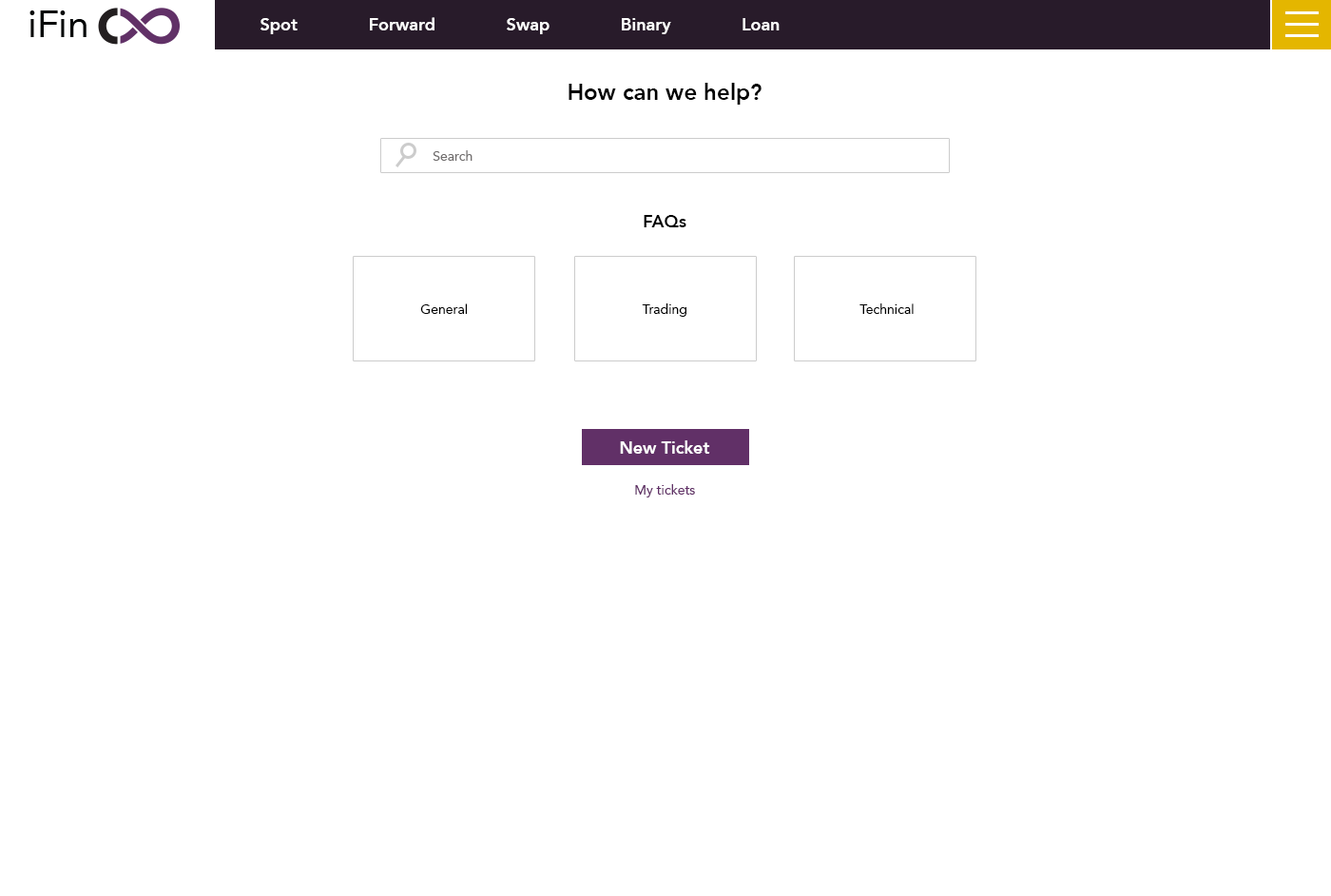
<style>
.page{position:relative;width:1331px;height:896px;background:#ffffff}
.page>*{position:absolute;margin:0}
.t1{font:17.1px "Avenir-Heavy";color:#ffffff}
.t2{font:22.8px "Avenir-Heavy";color:#000000}
.t3{font:13.3px "Avenir-Roman";color:#716e6e}
.t4{font:17.1px "Avenir-Heavy";color:#000000}
.t5{font:13.3px "Avenir-Roman";color:#000000}
.t6{font:13.3px "Avenir-Roman";color:#613067}
</style>
<div class="page">
<p class="t1" style="left:261px;top:17px;width:519px;height:17px">Spot              Forward              Swap              Binary              Loan</p>
<p class="t2" style="left:569px;top:83px;width:193px;height:22px">How can we help?</p>
<p class="t3" style="left:433px;top:150px;width:40px;height:11px">Search</p>
<p class="t4" style="left:644px;top:215px;width:43px;height:12px">FAQs</p>
<p class="t5" style="left:420px;top:303px;width:48px;height:11px">General</p>
<p class="t5" style="left:642px;top:303px;width:45px;height:14px">Trading</p>
<p class="t5" style="left:860px;top:303px;width:54px;height:11px">Technical</p>
<p class="t1" style="left:620px;top:440px;width:90px;height:14px">New Ticket</p>
<p class="t6" style="left:635px;top:484px;width:60px;height:13px">My tickets</p>
</div>
